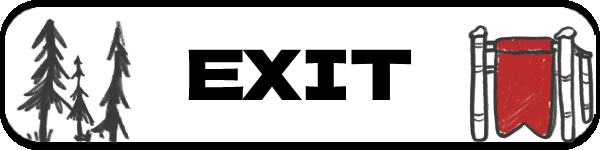
<style>
.page{position:relative;width:600px;height:150px;background:#ffffff}
.page>*{position:absolute;margin:0}
.t1{font:69.3px "DelaGothicOne-Regular";color:#000000}
</style>
<div class="page">
<p class="t1" style="left:188px;top:49px;width:224px;height:51px">EXIT</p>
</div>
